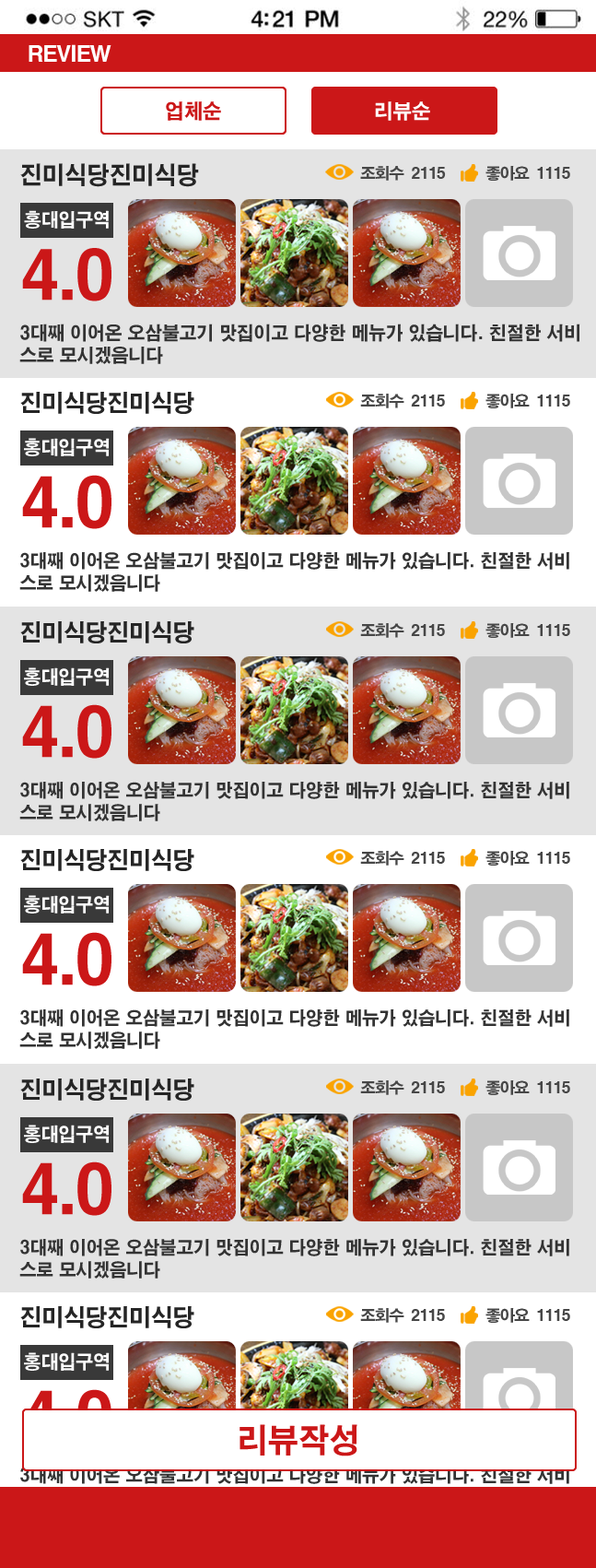
<style>
.page{position:relative;width:596px;height:1568px;background:#ffffff}
.page>*{position:absolute;margin:0}
.t1{font:21.9px "HYgtrE";letter-spacing:-0.085em;color:#ffffff}
.t2{font:20.2px "HYgtrE";letter-spacing:-0.005em;color:#cb1718;scale:0.94 1}
.t3{font:20.2px "HYgtrE";letter-spacing:-0.005em;color:#ffffff;scale:0.94 1}
.t4{font:24px "HYgtrE";letter-spacing:-0.005em;color:#252525;scale:0.94 1}
.t5{font:15.7px "HYgtrE";letter-spacing:-0.085em;color:#474747}
.t6{font:15.6px "HYgtrE";letter-spacing:-0.085em;color:#474747}
.t7{font:18.4px "HYgtrE";color:#ffffff;scale:0.94 1}
.t8{font:66.4px "HYgtrE";letter-spacing:-0.085em;color:#cb1718}
.t9{font:18.4px/22.3px "HYgtrE";letter-spacing:-0.005em;color:#333333;scale:0.94 1}
.t10{font:23.4px "HYgtrE";letter-spacing:-0.005em;color:#252525;scale:0.94 1}
.t11{font:18.6px "HYgtrE";letter-spacing:-0.005em;color:#ffffff;scale:0.94 1}
.t12{font:66.5px "HYgtrE";letter-spacing:-0.085em;color:#cb1718}
.t13{font:18.1px/22.3px "HYgtrE";letter-spacing:-0.005em;color:#333333;scale:0.94 1}
.t14{font:66.5px "HYgtrE";letter-spacing:-0.085em}
.t15{font:32.9px "HYgtrE";letter-spacing:-0.005em;color:#cb1718;scale:0.94 1}
.t16{font:18.1px/22.3px "HYgtrE";letter-spacing:-0.005em;scale:0.94 1}
</style>
<div class="page">
<p class="t1" style="left:29px;top:44px;width:83px;height:18px">REVIEW</p>
<p class="t2" style="left:166px;top:101px;width:55px;height:20px">업체순</p>
<p class="t3" style="left:375px;top:101px;width:55px;height:20px">리뷰순</p>
<p class="t4" style="left:20px;top:163px;width:179px;height:24px">진미식당진미식당</p>
<p class="t5" style="left:360px;top:166px;width:86px;height:15px">조회수  2115</p>
<p class="t6" style="left:486px;top:166px;width:85px;height:15px">좋아요  1115</p>
<p class="t7" style="left:24px;top:210px;width:85px;height:19px">홍대입구역</p>
<p class="t8" style="left:22px;top:248px;width:90px;height:53px">4.0</p>
<p class="t9" style="left:19px;top:324px;width:562px;height:40px">3대째 이어온 오삼불고기 맛집이고 다양한 메뉴가 있습니다. 친절한 서비<br>스로 모시겠음니다</p>
<p class="t10" style="left:20px;top:392px;width:175px;height:22px">진미식당진미식당</p>
<p class="t6" style="left:360px;top:394px;width:85px;height:14px">조회수  2115</p>
<p class="t6" style="left:486px;top:394px;width:85px;height:14px">좋아요  1115</p>
<p class="t11" style="left:24px;top:438px;width:86px;height:18px">홍대입구역</p>
<p class="t12" style="left:22px;top:475px;width:90px;height:54px">4.0</p>
<p class="t13" style="left:19px;top:552px;width:551px;height:40px">3대째 이어온 오삼불고기 맛집이고 다양한 메뉴가 있습니다. 친절한 서비<br>스로 모시겠음니다</p>
<p class="t10" style="left:20px;top:621px;width:175px;height:22px">진미식당진미식당</p>
<p class="t6" style="left:360px;top:623px;width:85px;height:15px">조회수  2115</p>
<p class="t6" style="left:486px;top:623px;width:85px;height:15px">좋아요  1115</p>
<p class="t11" style="left:24px;top:667px;width:86px;height:19px">홍대입구역</p>
<p class="t12" style="left:22px;top:704px;width:90px;height:55px">4.0</p>
<p class="t13" style="left:19px;top:782px;width:551px;height:39px">3대째 이어온 오삼불고기 맛집이고 다양한 메뉴가 있습니다. 친절한 서비<br>스로 모시겠음니다</p>
<p class="t10" style="left:20px;top:849px;width:175px;height:22px">진미식당진미식당</p>
<p class="t6" style="left:360px;top:851px;width:85px;height:15px">조회수  2115</p>
<p class="t6" style="left:486px;top:851px;width:85px;height:15px">좋아요  1115</p>
<p class="t11" style="left:24px;top:895px;width:86px;height:19px">홍대입구역</p>
<p class="t12" style="left:22px;top:932px;width:90px;height:54px">4.0</p>
<p class="t13" style="left:19px;top:1009px;width:551px;height:40px">3대째 이어온 오삼불고기 맛집이고 다양한 메뉴가 있습니다. 친절한 서비<br>스로 모시겠음니다</p>
<p class="t10" style="left:20px;top:1079px;width:175px;height:22px">진미식당진미식당</p>
<p class="t6" style="left:360px;top:1080px;width:85px;height:15px">조회수  2115</p>
<p class="t6" style="left:486px;top:1080px;width:85px;height:15px">좋아요  1115</p>
<p class="t11" style="left:24px;top:1125px;width:86px;height:18px">홍대입구역</p>
<p class="t12" style="left:22px;top:1161px;width:90px;height:55px">4.0</p>
<p class="t13" style="left:19px;top:1239px;width:551px;height:40px">3대째 이어온 오삼불고기 맛집이고 다양한 메뉴가 있습니다. 친절한 서비<br>스로 모시겠음니다</p>
<p class="t10" style="left:20px;top:1306px;width:175px;height:22px">진미식당진미식당</p>
<p class="t6" style="left:360px;top:1308px;width:85px;height:15px">조회수  2115</p>
<p class="t6" style="left:486px;top:1308px;width:85px;height:15px">좋아요  1115</p>
<p class="t11" style="left:24px;top:1352px;width:86px;height:19px">홍대입구역</p>
<p class="t14" style="left:22px;top:1389px;width:90px;height:55px">4.0</p>
<p class="t15" style="left:240px;top:1424px;width:118px;height:32px">리뷰작성</p>
<p class="t16" style="left:19px;top:1467px;width:551px;height:39px">3대째 이어온 오삼불고기 맛집이고 다양한 메뉴가 있습니다. 친절한 서비<br>스로 모시겠음니다</p>
</div>
